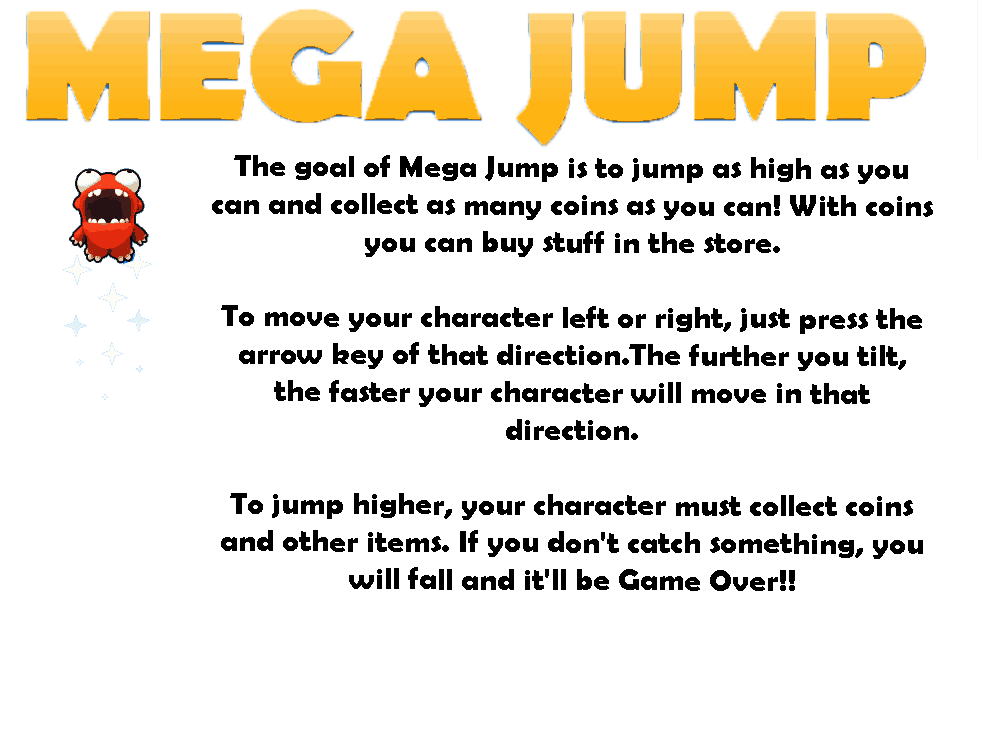
<style>
.page{position:relative;width:1000px;height:750px;background:#ffffff}
.page>*{position:absolute;margin:0}
.t1{font:31.3px "BerlinSansFBDemi-Bold";color:#000000}
</style>
<div class="page">
<p class="t1" style="left:212px;top:155px;width:721px;height:436px;text-align:center">The goal of Mega Jump is to jump as high as you can and collect as many coins as you can! With coins you can buy stuff in the store.<br> <br>To move your character left or right, just press the arrow key of that direction.The further you tilt, the faster your character will move in that direction.<br> <br>To jump higher, your character must collect coins and other items. If you don't catch something, you will fall and it'll be Game Over!!</p>
</div>
